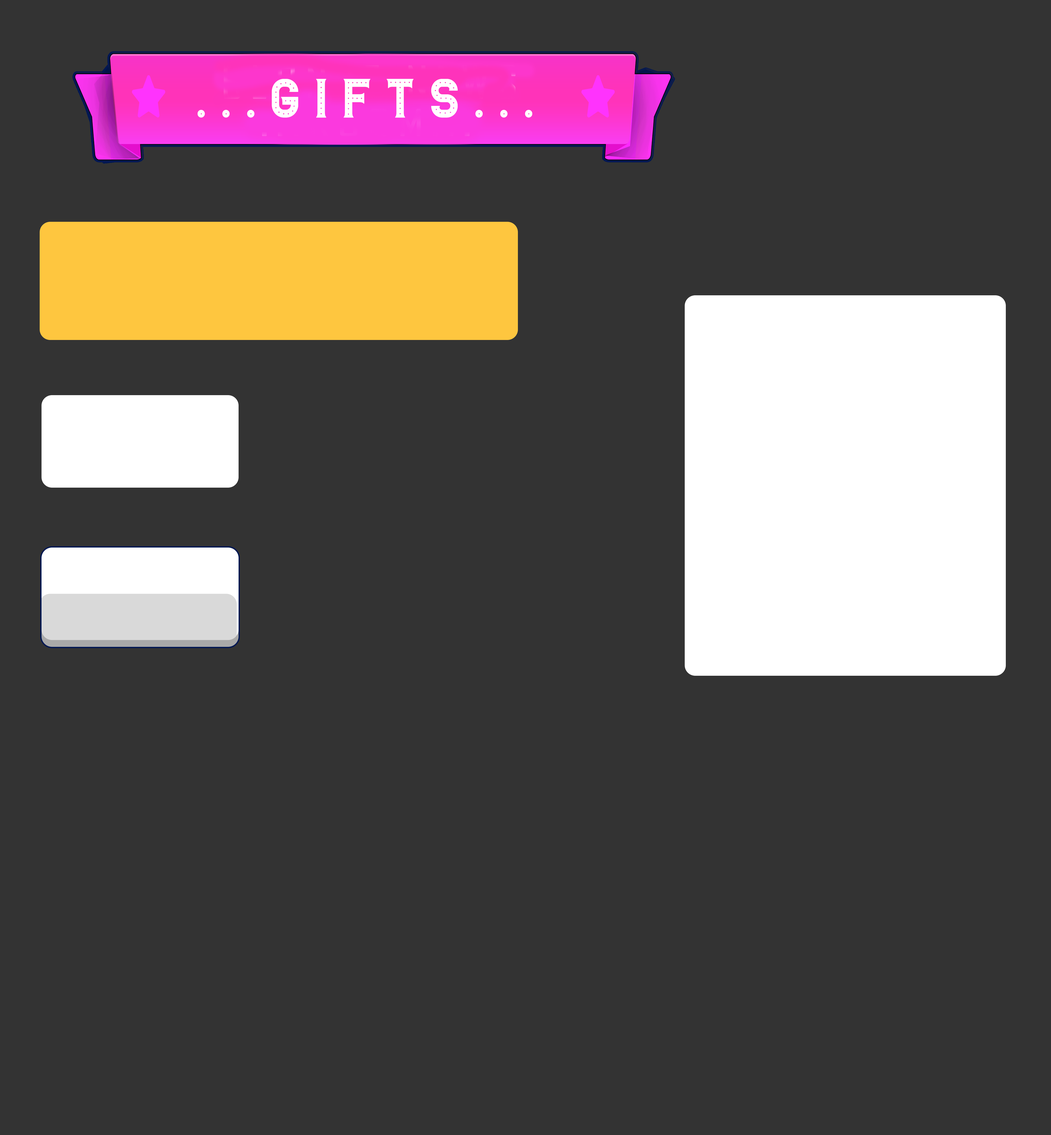
<style>
.page{position:relative;width:1051px;height:1135px;background:#333333}
.page>*{position:absolute;margin:0}
.t1{font:56.4px "Casino-Regular";letter-spacing:0.28em;color:#ffffff;text-transform:uppercase;font-weight:bold;scale:0.93 1}
</style>
<div class="page">
<p class="t1" style="left:198px;top:79px;width:334px;height:39px">...Gifts...</p>
</div>
